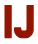
<style>
.page{position:relative;width:38px;height:44px;background:#ffffff}
.page>*{position:absolute;margin:0}
.t1{font:45.8px "Revalate-Regular";color:#941500;font-weight:bold;scale:0.89 1}
</style>
<div class="page">
<p class="t1" style="left:4px;top:5px;width:30px;height:34px">IJ</p>
</div>
